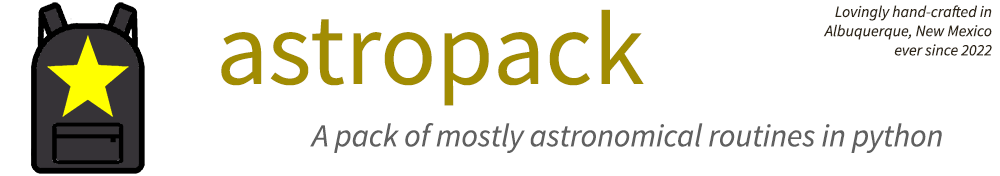
<style>
.page{position:relative;width:1000px;height:176px;background:#ffffff}
.page>*{position:absolute;margin:0}
.t1{font:16px "SourceSansPro-It";color:#302719}
.t2{font:104px "SourceSansPro-Regular";color:#a18c02}
.t3{font:32px "SourceSansPro-It";color:#606060}
</style>
<div class="page">
<p class="t1" style="left:823px;top:5px;width:169px;height:51px;text-align:right">Lovingly hand-crafted in<br>Albuquerque, New Mexico<br>ever since 2022</p>
<p class="t2" style="left:221px;top:9px;width:423px;height:97px">astropack</p>
<p class="t3" style="left:310px;top:123px;width:632px;height:30px">A pack of mostly astronomical routines in python</p>
</div>
